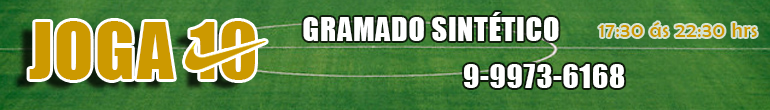
<style>
.page{position:relative;width:770px;height:110px}
.page>*{position:absolute;margin:0}
.t1{font:30px "Impact";letter-spacing:0.025em;color:#ffffff}
.t2{font:72px "Impact";letter-spacing:0.025em;color:#cc9900}
.t3{font:21px "BerlinSansFB-Reg";letter-spacing:0.025em;color:#cc9900}
</style>
<div class="page">
<p class="t1" style="left:303px;top:12px;width:256px;height:29px">GRAMADO SINTÉTICO</p>
<p class="t2" style="left:29px;top:21px;width:226px;height:59px">JOGA 10</p>
<p class="t3" style="left:599px;top:22px;width:158px;height:15px">17:30 ás 22:30 hrs</p>
<p class="t1" style="left:464px;top:64px;width:161px;height:24px">9-9973-6168</p>
</div>
